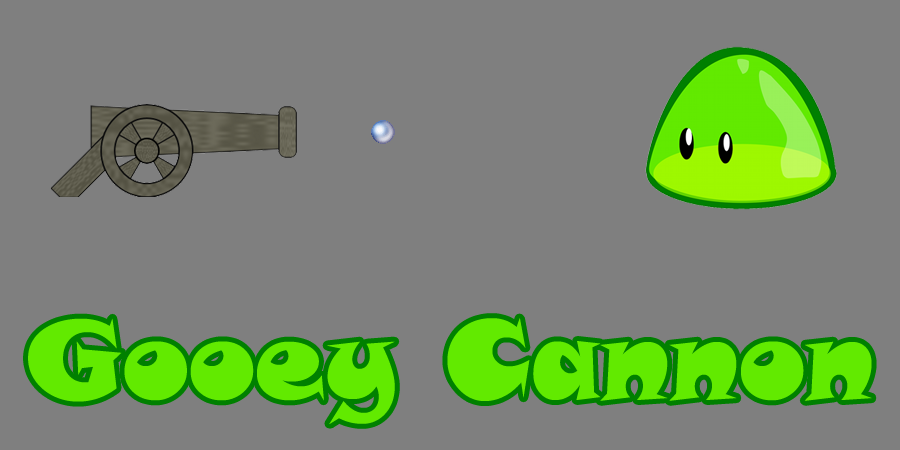
<style>
.page{position:relative;width:900px;height:450px;background:#7f7f7f}
.page>*{position:absolute;margin:0}
.t1{font:110px "SnapITC-Regular";color:#62ea00}
</style>
<div class="page">
<p class="t1" style="left:28px;top:318px;width:844px;height:106px">Gooey Cannon</p>
</div>
